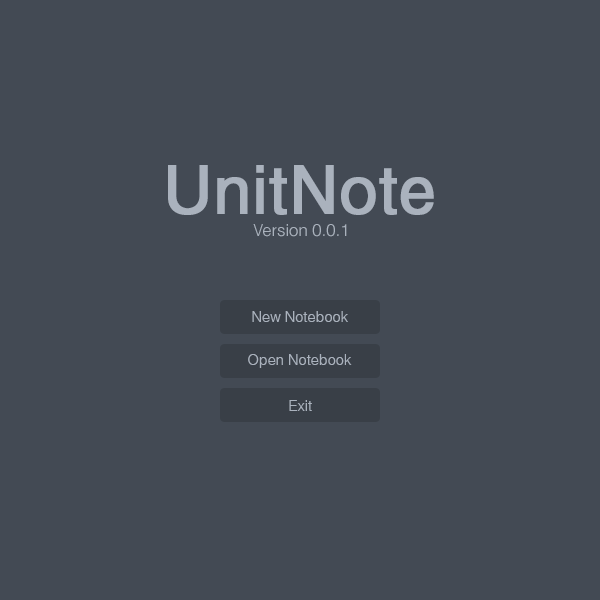
<style>
.page{position:relative;width:600px;height:600px;background:#434a54}
.page>*{position:absolute;margin:0}
.t1{font:66.7px "Helvetica";color:#aab2bd;font-weight:bold}
.t2{font:16.7px "HelveticaLight";color:#aab2bd}
.t3{font:14.6px "HelveticaLight";color:#aab2bd}
</style>
<div class="page">
<p class="t1" style="left:168px;top:165px;width:266px;height:50px">UnitNote</p>
<p class="t2" style="left:253px;top:224px;width:94px;height:13px">Version 0.0.1</p>
<p class="t3" style="left:252px;top:311px;width:96px;height:11px">New Notebook</p>
<p class="t3" style="left:248px;top:354px;width:104px;height:14px">Open Notebook</p>
<p class="t3" style="left:289px;top:400px;width:23px;height:11px">Exit</p>
</div>
